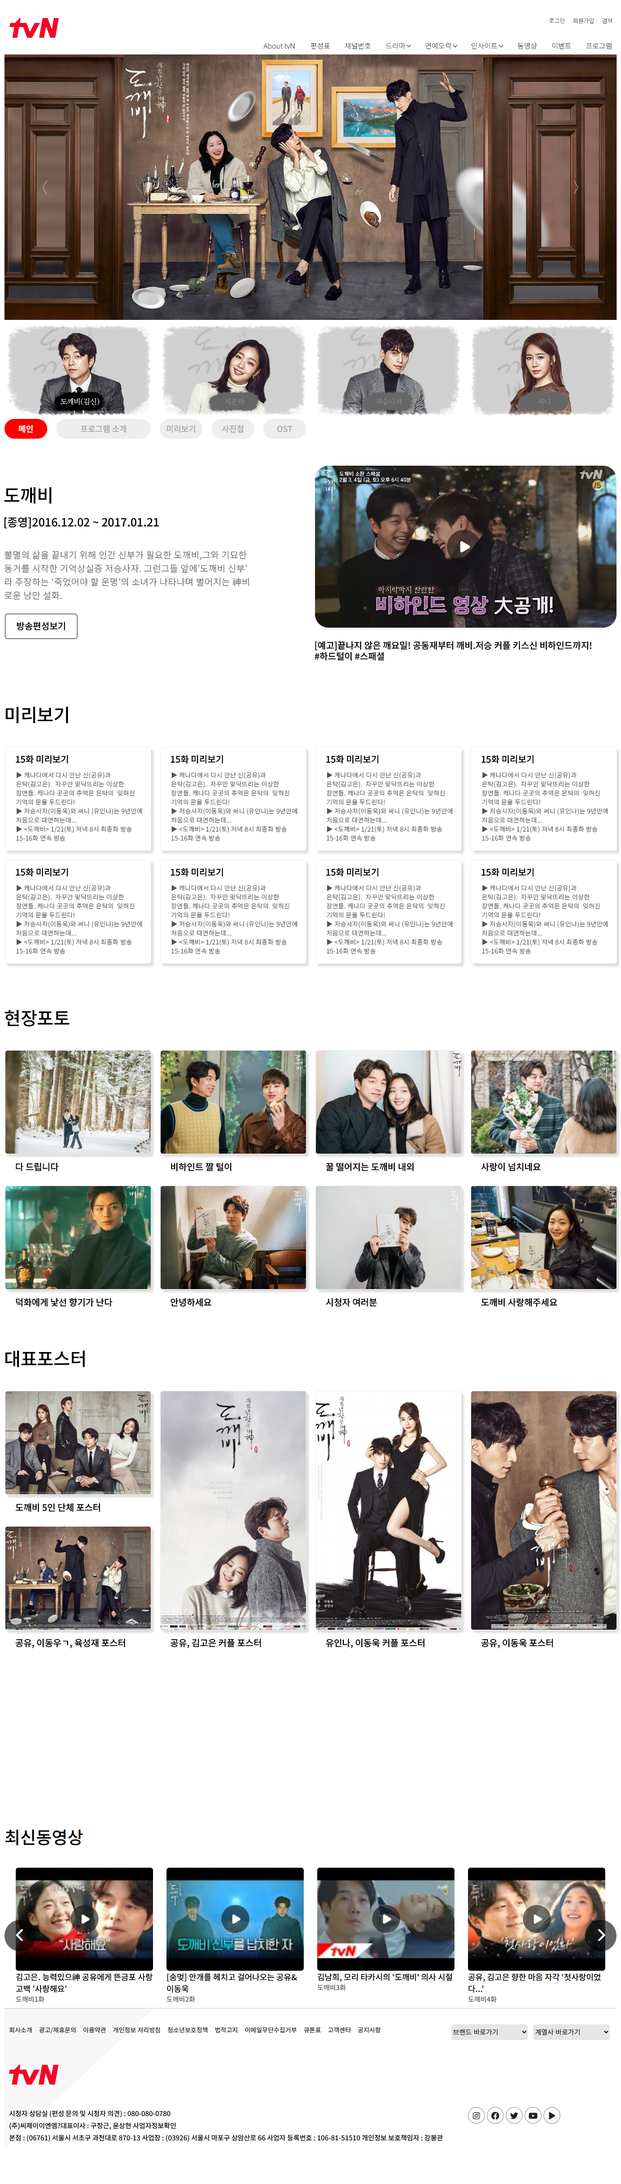
<style>
.page{position:relative;width:621px;height:2184px;background:#ffffff}
.page>*{position:absolute;margin:0}
.t1{font:5.8px "NotoSansKR-Regular";color:#222222;font-weight:bold}
.t2{font:7.2px "NotoSansKR-Regular";color:#222222;font-weight:bold}
.t3{font:8.1px "NotoSansKR-Medium";color:#ffffff;font-weight:bold}
.t4{font:8.1px "NotoSansKR-Medium";color:#aaaaaa;font-weight:bold}
.t5{font:18px "NotoSansKR-Medium";color:#000000;font-weight:bold}
.t6{font:11.3px "NotoSansKR-Medium";color:#000000;font-weight:bold}
.t7{font:9px/13.5px "NotoSansKR-Light";letter-spacing:0.03em;color:#535353;font-weight:bold}
.t8{font:9px "NotoSansKR-Medium";color:#000000;font-weight:bold}
.t9{font:6.3px/9px "NotoSansKR-Light";letter-spacing:0.03em;color:#535353;font-weight:bold}
</style>
<div class="page">
<p class="t1" style="left:549px;top:18px;width:16px;height:5px">로그인</p>
<p class="t1" style="left:573px;top:18px;width:21px;height:5px">회원가입</p>
<p class="t1" style="left:602px;top:18px;width:10px;height:5px">검색</p>
<p class="t2" style="left:263px;top:43px;width:32px;height:6px">About tvN</p>
<p class="t2" style="left:310px;top:42px;width:20px;height:7px">편성표</p>
<p class="t2" style="left:345px;top:42px;width:26px;height:7px">채널번호</p>
<p class="t2" style="left:386px;top:42px;width:19px;height:7px">드라마</p>
<p class="t2" style="left:425px;top:42px;width:26px;height:7px">연예오락</p>
<p class="t2" style="left:472px;top:42px;width:25px;height:7px">인사이트</p>
<p class="t2" style="left:517px;top:42px;width:20px;height:7px">동영상</p>
<p class="t2" style="left:552px;top:42px;width:19px;height:7px">이벤트</p>
<p class="t2" style="left:586px;top:42px;width:26px;height:7px">프로그램</p>
<p class="t3" style="left:19px;top:425px;width:14px;height:8px">메인</p>
<p class="t4" style="left:81px;top:425px;width:45px;height:8px">프로그램 소개</p>
<p class="t4" style="left:166px;top:425px;width:29px;height:8px">미리보기</p>
<p class="t4" style="left:222px;top:425px;width:21px;height:8px">사진첩</p>
<p class="t4" style="left:277px;top:426px;width:15px;height:6px">OST</p>
<p class="t5" style="left:4px;top:487px;width:48px;height:17px">도깨비</p>
<p class="t6" style="left:4px;top:517px;width:155px;height:12px">[종영]2016.12.02 ~ 2017.01.21</p>
<p class="t7" style="left:4px;top:551px;width:245px;height:49px">불멸의 삶을 끝내기 위해 인간 신부가 필요한 도깨비,그와 기묘한<br>동거를 시작한 기억상실증 저승사자. 그런그들 앞에’도깨비 신부’<br>라 주장하는 ‘죽었어야 할 운명’의 소녀가 나타나며 벌어지는 神비<br>로운 낭만 설화.</p>
<p class="t8" style="left:17px;top:622px;width:48px;height:8px">방송편성보기</p>
<p class="t8" style="left:315px;top:641px;width:277px;height:20px">[예고]끝나지 않은 깨요일! 공동재부터 깨비.저승 커플 키스신 비하인드까지!<br>#하드털이 #스패셜</p>
<p class="t5" style="left:5px;top:706px;width:63px;height:18px">미리보기</p>
<p class="t8" style="left:16px;top:755px;width:52px;height:9px">15화 미리보기</p>
<p class="t8" style="left:171px;top:755px;width:52px;height:9px">15화 미리보기</p>
<p class="t8" style="left:326px;top:755px;width:52px;height:9px">15화 미리보기</p>
<p class="t8" style="left:481px;top:755px;width:53px;height:9px">15화 미리보기</p>
<p class="t9" style="left:16px;top:772px;width:126px;height:69px">▶ 캐나다에서 다시 만난 신(공유)과 은탁(김고은).  자꾸만 맞닥뜨리는 이상한 장면들. 캐나다 곳곳의 추억은 은탁의  잊혀진 기억의 문을 두드린다! <br>▶ 저승사자(이동욱)와 써니 (유인나)는 9년만에 처음으로 대면하는데...<br>▶ &lt;도깨비&gt; 1/21(토) 저녁 8시 최종화 방송<br>15-16화 연속 방송</p>
<p class="t9" style="left:171px;top:772px;width:126px;height:69px">▶ 캐나다에서 다시 만난 신(공유)과 은탁(김고은).  자꾸만 맞닥뜨리는 이상한 장면들. 캐나다 곳곳의 추억은 은탁의  잊혀진 기억의 문을 두드린다! <br>▶ 저승사자(이동욱)와 써니 (유인나)는 9년만에 처음으로 대면하는데...<br>▶ &lt;도깨비&gt; 1/21(토) 저녁 8시 최종화 방송<br>15-16화 연속 방송</p>
<p class="t9" style="left:326px;top:772px;width:127px;height:69px">▶ 캐나다에서 다시 만난 신(공유)과 은탁(김고은).  자꾸만 맞닥뜨리는 이상한 장면들. 캐나다 곳곳의 추억은 은탁의  잊혀진 기억의 문을 두드린다! <br>▶ 저승사자(이동욱)와 써니 (유인나)는 9년만에 처음으로 대면하는데...<br>▶ &lt;도깨비&gt; 1/21(토) 저녁 8시 최종화 방송<br>15-16화 연속 방송</p>
<p class="t9" style="left:482px;top:772px;width:126px;height:69px">▶ 캐나다에서 다시 만난 신(공유)과 은탁(김고은).  자꾸만 맞닥뜨리는 이상한 장면들. 캐나다 곳곳의 추억은 은탁의  잊혀진 기억의 문을 두드린다! <br>▶ 저승사자(이동욱)와 써니 (유인나)는 9년만에 처음으로 대면하는데...<br>▶ &lt;도깨비&gt; 1/21(토) 저녁 8시 최종화 방송<br>15-16화 연속 방송</p>
<p class="t8" style="left:16px;top:868px;width:52px;height:9px">15화 미리보기</p>
<p class="t8" style="left:171px;top:868px;width:52px;height:9px">15화 미리보기</p>
<p class="t8" style="left:326px;top:868px;width:52px;height:9px">15화 미리보기</p>
<p class="t8" style="left:481px;top:868px;width:53px;height:9px">15화 미리보기</p>
<p class="t9" style="left:16px;top:885px;width:126px;height:69px">▶ 캐나다에서 다시 만난 신(공유)과 은탁(김고은).  자꾸만 맞닥뜨리는 이상한 장면들. 캐나다 곳곳의 추억은 은탁의  잊혀진 기억의 문을 두드린다! <br>▶ 저승사자(이동욱)와 써니 (유인나)는 9년만에 처음으로 대면하는데...<br>▶ &lt;도깨비&gt; 1/21(토) 저녁 8시 최종화 방송<br>15-16화 연속 방송</p>
<p class="t9" style="left:171px;top:885px;width:126px;height:69px">▶ 캐나다에서 다시 만난 신(공유)과 은탁(김고은).  자꾸만 맞닥뜨리는 이상한 장면들. 캐나다 곳곳의 추억은 은탁의  잊혀진 기억의 문을 두드린다! <br>▶ 저승사자(이동욱)와 써니 (유인나)는 9년만에 처음으로 대면하는데...<br>▶ &lt;도깨비&gt; 1/21(토) 저녁 8시 최종화 방송<br>15-16화 연속 방송</p>
<p class="t9" style="left:326px;top:885px;width:127px;height:69px">▶ 캐나다에서 다시 만난 신(공유)과 은탁(김고은).  자꾸만 맞닥뜨리는 이상한 장면들. 캐나다 곳곳의 추억은 은탁의  잊혀진 기억의 문을 두드린다! <br>▶ 저승사자(이동욱)와 써니 (유인나)는 9년만에 처음으로 대면하는데...<br>▶ &lt;도깨비&gt; 1/21(토) 저녁 8시 최종화 방송<br>15-16화 연속 방송</p>
<p class="t9" style="left:482px;top:885px;width:126px;height:69px">▶ 캐나다에서 다시 만난 신(공유)과 은탁(김고은).  자꾸만 맞닥뜨리는 이상한 장면들. 캐나다 곳곳의 추억은 은탁의  잊혀진 기억의 문을 두드린다! <br>▶ 저승사자(이동욱)와 써니 (유인나)는 9년만에 처음으로 대면하는데...<br>▶ &lt;도깨비&gt; 1/21(토) 저녁 8시 최종화 방송<br>15-16화 연속 방송</p>
<p class="t5" style="left:4px;top:1010px;width:66px;height:17px">현장포토</p>
<p class="t8" style="left:16px;top:1163px;width:43px;height:8px">다 드립니다</p>
<p class="t8" style="left:171px;top:1163px;width:60px;height:8px">비하인트 짤 털이</p>
<p class="t8" style="left:326px;top:1163px;width:88px;height:8px">꿀 떨어지는 도깨비 내외</p>
<p class="t8" style="left:481px;top:1163px;width:60px;height:8px">사랑이 넘치네요</p>
<p class="t8" style="left:16px;top:1298px;width:96px;height:9px">덕화에게 낯선 향기가 난다</p>
<p class="t8" style="left:171px;top:1298px;width:40px;height:9px">안녕하세요</p>
<p class="t8" style="left:326px;top:1298px;width:51px;height:9px">시청자 여러분</p>
<p class="t8" style="left:481px;top:1298px;width:77px;height:9px">도깨비 사랑해주세요</p>
<p class="t5" style="left:5px;top:1350px;width:80px;height:18px">대표포스터</p>
<p class="t8" style="left:15px;top:1503px;width:85px;height:9px">도깨비 5인 단체 포스터</p>
<p class="t8" style="left:15px;top:1639px;width:110px;height:10px">공유, 이동우ㄱ, 육성재 포스터</p>
<p class="t8" style="left:171px;top:1639px;width:90px;height:9px">공유, 김고은 커플 포스터</p>
<p class="t8" style="left:326px;top:1639px;width:99px;height:10px">유인나, 이동욱 커플 포스터</p>
<p class="t8" style="left:481px;top:1639px;width:72px;height:10px">공유, 이동욱 포스터</p>
</div>
